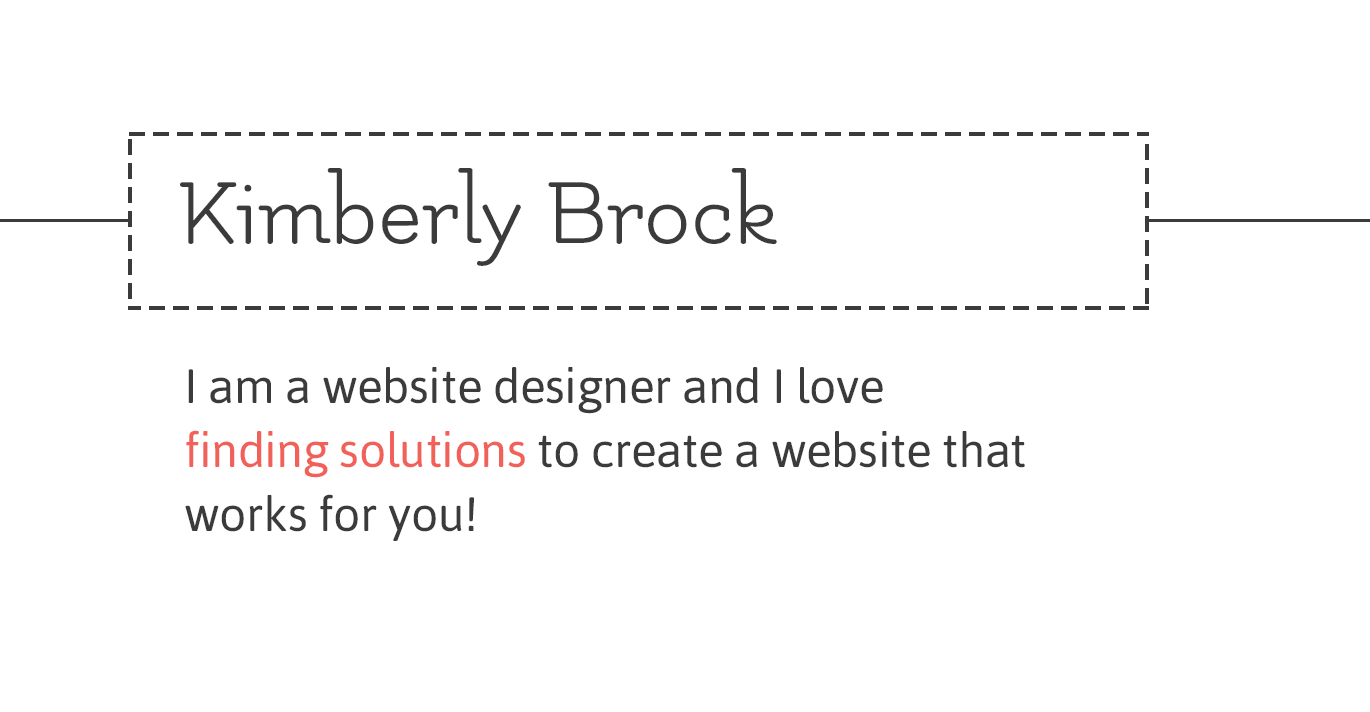
<style>
.page{position:relative;width:1370px;height:712px;background:#ffffff}
.page>*{position:absolute;margin:0}
.t1{font:100px "Flamenco-Regular";color:#3b3b3b}
.t2{font:48px/64px "Asap-Regular";letter-spacing:-0.01em;color:#3b3b3b}
.t3{font:48px/64px "Asap-Regular";letter-spacing:-0.01em;color:#3b3b3b;text-transform:uppercase}
.t4{font:48px/64px "Asap-Regular";letter-spacing:-0.01em;color:#f16059}
</style>
<div class="page">
<p class="t1" style="left:180px;top:168px;width:597px;height:98px">Kimberly Brock</p>
<p class="t2" style="left:185px;top:367px;width:840px;height:174px"><span class="t3">I </span>am a website designer and I love <br><span class="t4">finding solutions</span> to create a website that works for you!</p>
</div>
